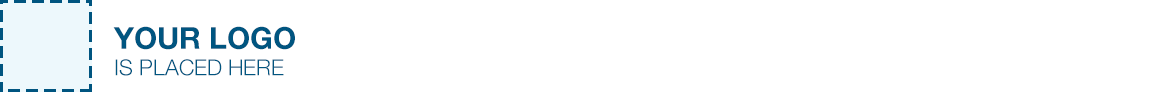
<style>
.page{position:relative;width:1170px;height:92px;background:#ffffff}
.page>*{position:absolute;margin:0}
.t1{font:22px/26.4px "HelveticaNeue-Light";color:#005580}
.t2{font:30px/26.4px "HelveticaNeue-Bold";color:#005580}
</style>
<div class="page">
<p class="t1" style="left:113px;top:26px;width:182px;height:50px"><span class="t2">YOUR LOGO<br></span>IS PLACED HERE</p>
</div>
